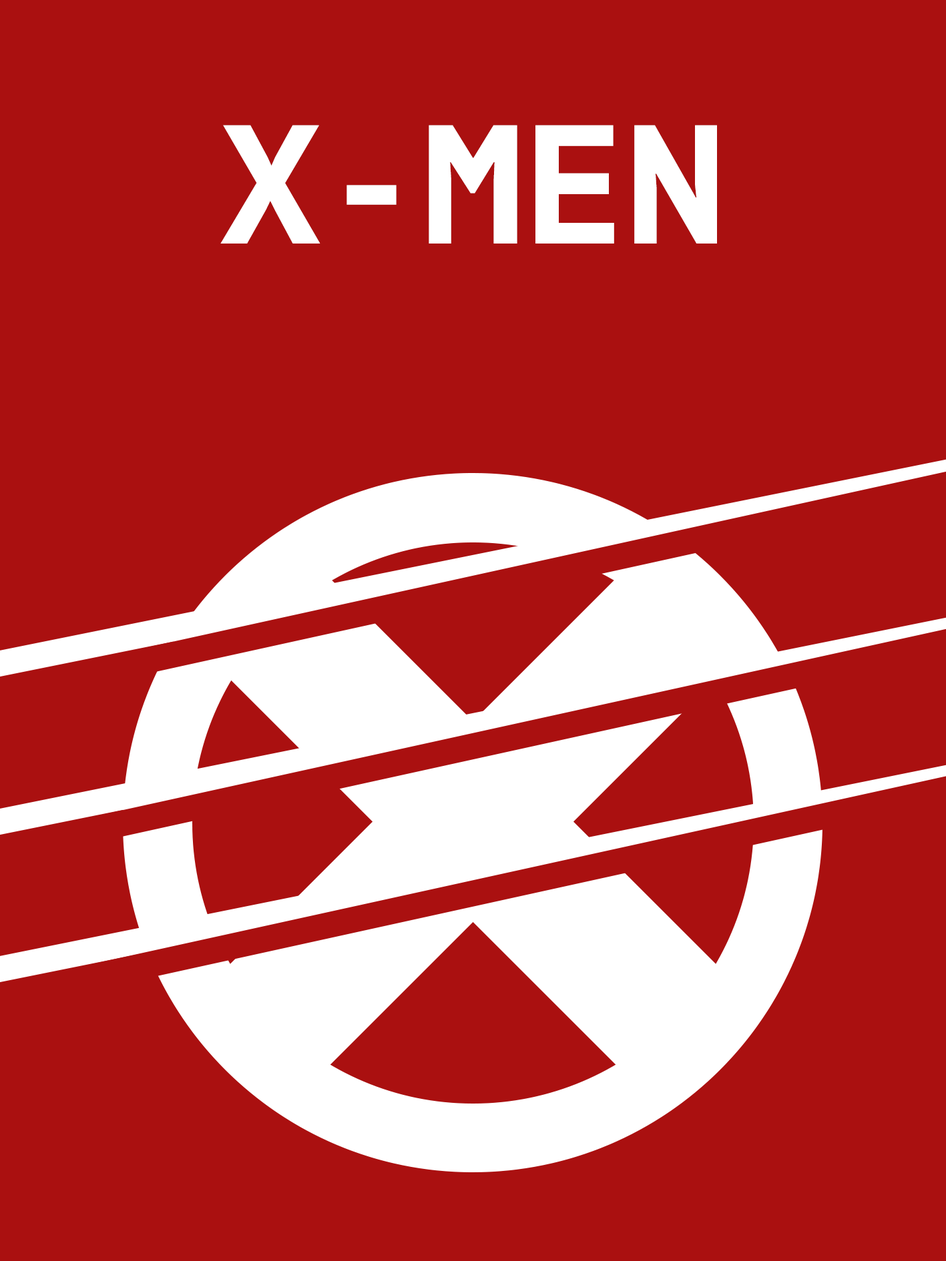
<style>
.page{position:relative;width:946px;height:1261px;background:#aa1010}
.page>*{position:absolute;margin:0}
.t1{font:168.9px "PTMono-Bold";color:#ffffff}
</style>
<div class="page">
<p class="t1" style="left:220px;top:125px;width:497px;height:119px">X-MEN</p>
</div>
